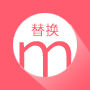
<style>
.page{position:relative;width:90px;height:90px;background:#ff5d6f}
.page>*{position:absolute;margin:0}
.t1{font:14px "SourceHanSansCN-Light";color:#ff5d6f;font-weight:bold}
</style>
<div class="page">
<p class="t1" style="left:31px;top:23px;width:28px;height:14px">替换</p>
</div>
